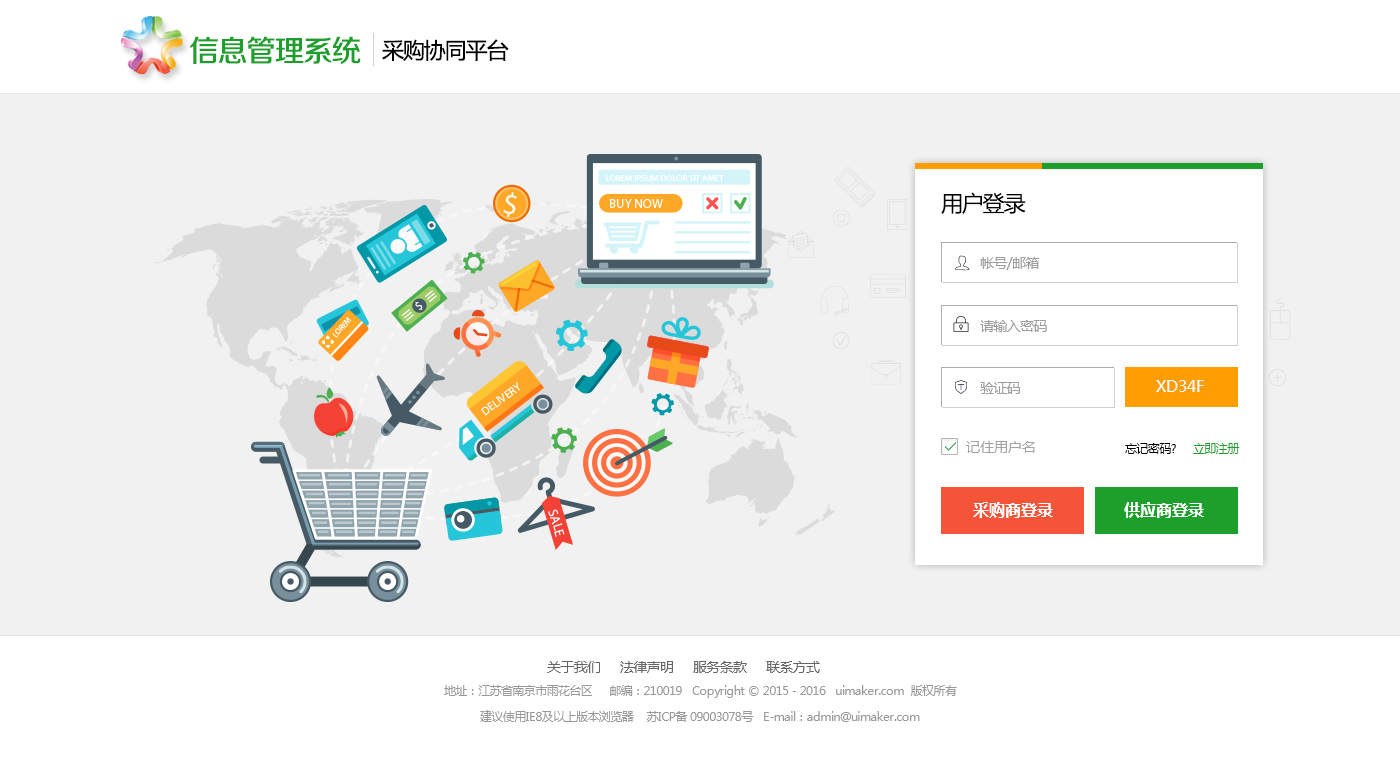
<style>
.page{position:relative;width:1400px;height:778px;background:#f1f1f1}
.page>*{position:absolute;margin:0}
.t1{font:30px "FZZZHUNHJW--GB1-0";letter-spacing:-0.05em;color:#1da02b}
.t2{font:22px "MicrosoftYaHei";letter-spacing:-0.05em;color:#000000}
.t3{font:14px "MicrosoftYaHei";letter-spacing:-0.05em;color:#9d9d9d}
.t4{font:16px "MicrosoftYaHei";color:#ffffff}
.t5{font:14px "MicrosoftYaHei";color:#a3a3a3}
.t6{font:12px "MicrosoftYaHei";letter-spacing:-0.05em;color:#000000}
.t7{font:12px "MicrosoftYaHei";letter-spacing:-0.05em;color:#1da02b}
.t8{font:16px "MicrosoftYaHei-Bold";color:#ffffff}
.t9{font:14px "MicrosoftYaHei";letter-spacing:-0.05em;color:#666666}
.t10{font:12px "MicrosoftYaHei";letter-spacing:-0.05em;color:#999999}
</style>
<div class="page">
<p class="t1" style="left:190px;top:36px;width:171px;height:28px">信息管理系统</p>
<p class="t2" style="left:382px;top:39px;width:127px;height:22px">采购协同平台</p>
<p class="t2" style="left:941px;top:192px;width:85px;height:22px">用户登录</p>
<p class="t3" style="left:980px;top:257px;width:59px;height:13px">帐号/邮箱</p>
<p class="t3" style="left:980px;top:320px;width:67px;height:12px">请输入密码</p>
<p class="t3" style="left:980px;top:382px;width:40px;height:12px">验证码</p>
<p class="t4" style="left:1156px;top:380px;width:48px;height:12px">XD34F</p>
<p class="t5" style="left:966px;top:441px;width:69px;height:12px">记住用户名</p>
<p class="t6" style="left:1125px;top:443px;width:115px;height:11px">忘记密码? <span class="t7">    立即注册</span></p>
<p class="t8" style="left:973px;top:502px;width:80px;height:16px">采购商登录</p>
<p class="t8" style="left:1124px;top:502px;width:80px;height:16px">供应商登录</p>
<p class="t9" style="left:547px;top:661px;width:273px;height:12px">关于我们      法律声明      服务条款      联系方式</p>
<p class="t10" style="left:444px;top:685px;width:513px;height:13px">地址：江苏省南京市雨花台区     邮编：210019   Copyright © 2015 - 2016   uimaker.com  版权所有</p>
<p class="t10" style="left:480px;top:710px;width:440px;height:12px">建议使用IE8及以上版本浏览器    苏ICP备 09003078号   E-mail：admin@uimaker.com</p>
</div>
